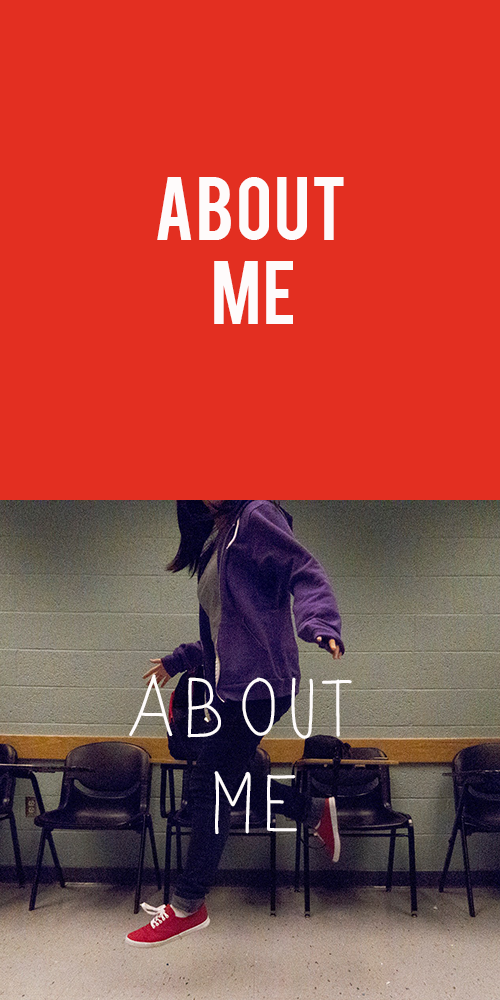
<style>
.page{position:relative;width:500px;height:1000px;background:#e32f21}
.page>*{position:absolute;margin:0}
.t1{font:70px "Bebas";color:#fefbfb}
.t2{font:80px "ElsieTallnSkinny";color:#fefbfb}
</style>
<div class="page">
<p class="t1" style="left:157px;top:177px;width:187px;height:147px;text-align:center">ABOUT <br>ME</p>
<p class="t2" style="left:129px;top:674px;width:223px;height:160px;text-align:center">ABOUT <br>ME</p>
</div>
